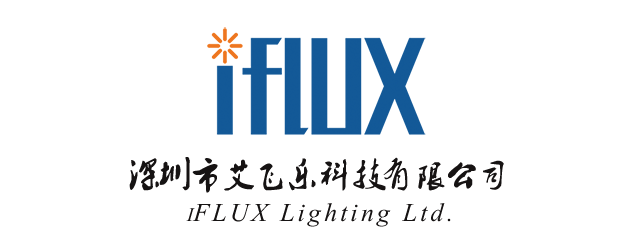
<style>
.page{position:relative;width:618px;height:229px;background:#ffffff}
.page>*{position:absolute;margin:0}
.t1{font:32px "Ò¶¸ùÓÑÃ«±ÊÐÐÊé";color:#161313}
.t2{font:32px "Vijaya";letter-spacing:0.1em;color:#161313}
.t3{font:24px "Vijaya";color:#161313}
</style>
<div class="page">
<p class="t1" style="left:129px;top:157px;width:375px;height:36px">深圳市艾飞乐科技有限公司</p>
<p class="t2" style="left:186px;top:203px;width:265px;height:24px"><span class="t3">I</span>FLUX Lighting Ltd.</p>
</div>
